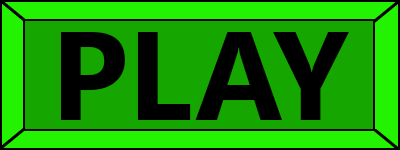
<style>
.page{position:relative;width:400px;height:150px;background:#16a600}
.page>*{position:absolute;margin:0}
.t1{font:125px "NirmalaUI-Bold";color:#000000}
</style>
<div class="page">
<p class="t1" style="left:60px;top:32px;width:289px;height:88px">PLAY</p>
</div>
